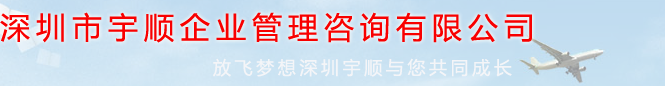
<style>
.page{position:relative;width:665px;height:86px}
.page>*{position:absolute;margin:0}
.t1{font:30px "MicrosoftYaHei";letter-spacing:0.2em;color:#f80000;text-transform:uppercase}
.t2{font:18px "MicrosoftYaHei";letter-spacing:0.2em;color:#f4f5f8;text-transform:uppercase}
</style>
<div class="page">
<p class="t1" style="left:0px;top:12px;width:532px;height:31px">深圳市宇顺企业管理咨询有限公司</p>
<p class="t2" style="left:213px;top:58px;width:299px;height:19px">放飞梦想深圳宇顺与您共同成长</p>
</div>
